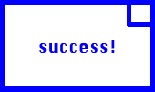
<style>
.page{position:relative;width:155px;height:92px;background:#ffffff}
.page>*{position:absolute;margin:0}
.t1{font:16.7px "Krungthep";color:#0100fe}
</style>
<div class="page">
<p class="t1" style="left:39px;top:40px;width:76px;height:13px">success!</p>
</div>
